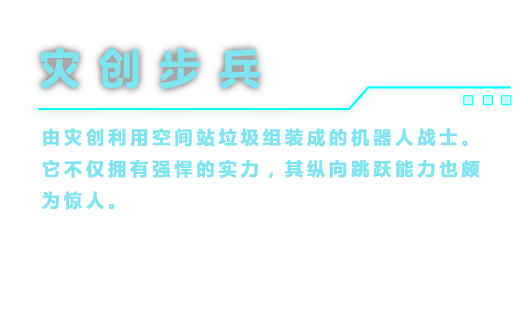
<style>
.page{position:relative;width:528px;height:312px;background:#ffffff}
.page>*{position:absolute;margin:0}
.t1{font:42px "MicrosoftYaHei-Bold";letter-spacing:0.4em;color:#80e3f0;font-weight:bold}
.t2{font:18px "MicrosoftYaHei-Bold";letter-spacing:0.2em;color:#80e3f0;font-weight:bold}
</style>
<div class="page">
<p class="t1" style="left:39px;top:47px;width:221px;height:43px">灾创步兵</p>
<p class="t2" style="left:42px;top:128px;width:438px;height:82px">由灾创利用空间站垃圾组装成的机器人战士。<br>它不仅拥有强悍的实力，其纵向跳跃能力也颇<br>为惊人。</p>
</div>
